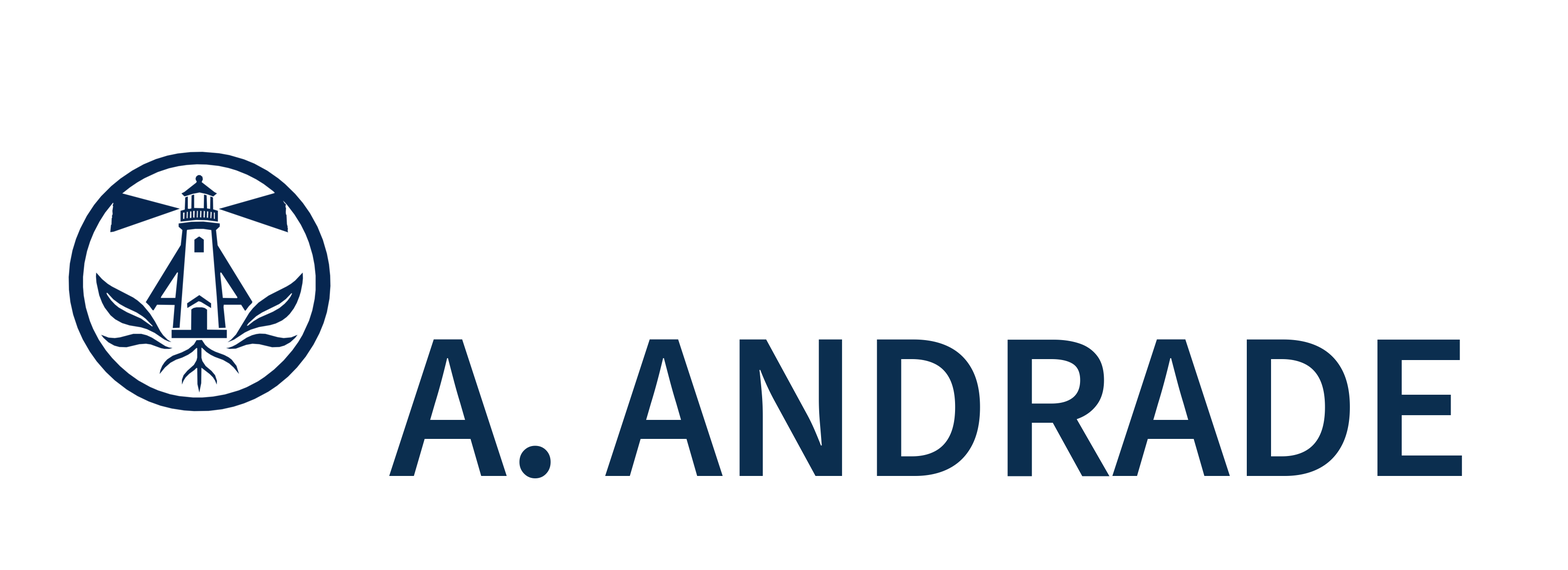
<style>
.page{position:relative;width:1568px;height:570px;background:#ffffff}
.page>*{position:absolute;margin:0}
.t1{font:209.1px "SourceSans3-SemiBold";color:#0b2e4f}
</style>
<div class="page">
<p class="t1" style="left:0px;top:0px;width:1568px;height:570px">A. ANDRADE</p>
</div>
